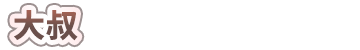
<style>
.page{position:relative;width:360px;height:50px;background:#ffffff}
.page>*{position:absolute;margin:0}
.t1{font:32px "SourceHanSansSC-Bold";color:#73534d;font-weight:bold}
</style>
<div class="page">
<p class="t1" style="left:14px;top:10px;width:64px;height:31px">大叔</p>
</div>
